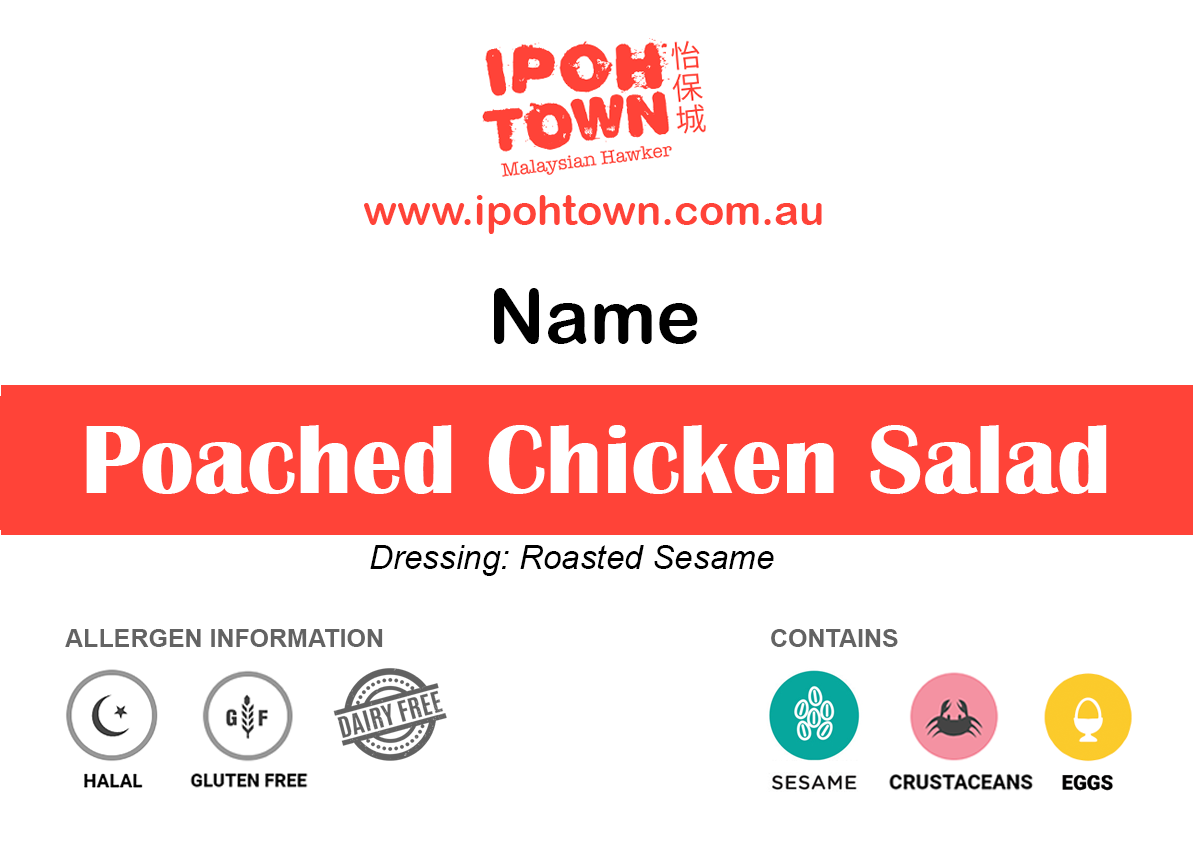
<style>
.page{position:relative;width:1193px;height:850px;background:#ffffff}
.page>*{position:absolute;margin:0}
.t1{font:41.7px "ArialRoundedMTBold";color:#ff4338}
.t2{font:75px "ArialRoundedMTBold";color:#000000}
.t3{font:100px "BritannicBold";color:#ffffff}
.t4{font:33.3px "Arial-ItalicMT";color:#000000}
.t5{font:25px "Arial-BoldMT";color:#636363}
</style>
<div class="page">
<p class="t1" style="left:364px;top:195px;width:458px;height:39px">www.ipohtown.com.au</p>
<p class="t2" style="left:494px;top:288px;width:204px;height:56px">Name</p>
<p class="t3" style="left:86px;top:425px;width:1021px;height:69px">Poached Chicken Salad</p>
<p class="t4" style="left:370px;top:545px;width:404px;height:31px">Dressing: Roasted Sesame</p>
<p class="t5" style="left:65px;top:629px;width:318px;height:18px">ALLERGEN INFORMATION</p>
<p class="t5" style="left:771px;top:629px;width:127px;height:18px">CONTAINS</p>
</div>
